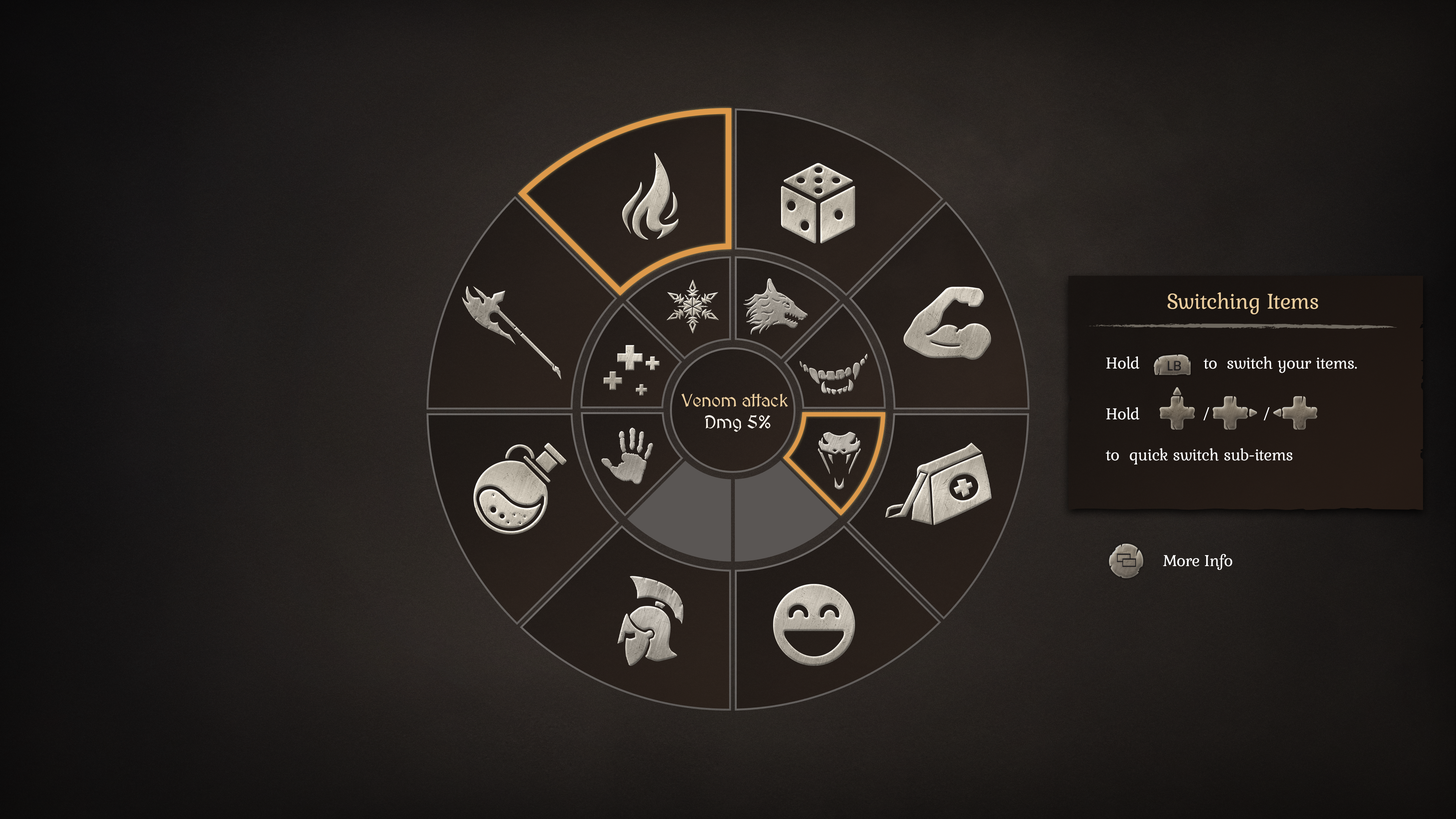
<style>
.page{position:relative;width:1456px;height:819px}
.page>*{position:absolute;margin:0}
.t1{font:22.7px "Kurale-Regular";letter-spacing:-0.02em;color:#ebcd9e}
.t2{font:17.1px "Kurale-Regular";letter-spacing:-0.02em;color:#ffffff}
.t3{font:18.2px "MedievalSharp";letter-spacing:-0.02em;color:#ecce9f}
.t4{font:18.2px "MedievalSharp";letter-spacing:-0.02em;color:#fff8ef}
</style>
<div class="page">
<p class="t1" style="left:1167px;top:292px;width:151px;height:22px">Switching Items</p>
<p class="t2" style="left:1106px;top:356px;width:251px;height:17px">Hold             to  switch your items.</p>
<p class="t3" style="left:681px;top:394px;width:107px;height:13px">Venom attack</p>
<p class="t2" style="left:1106px;top:407px;width:187px;height:57px">Hold             /           /<br><br>to  quick switch sub-items</p>
<p class="t4" style="left:705px;top:415px;width:65px;height:17px">Dmg 5%</p>
<p class="t2" style="left:1163px;top:554px;width:69px;height:16px">More Info</p>
</div>
